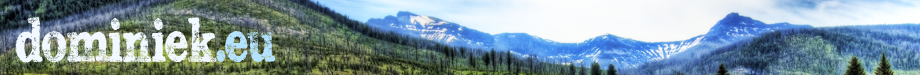
<style>
.page{position:relative;width:920px;height:75px}
.page>*{position:absolute;margin:0}
.t1{font:60px "SubwayNovella";color:#f1f8ff;scale:0.85 1}
.t2{font:60px "SubwayNovella";color:#b5e2ff;scale:0.85 1}
</style>
<div class="page">
<p class="t1" style="left:15px;top:17px;width:202px;height:46px">dominiek</p>
<p class="t2" style="left:216px;top:31px;width:60px;height:31px">.eu</p>
</div>
